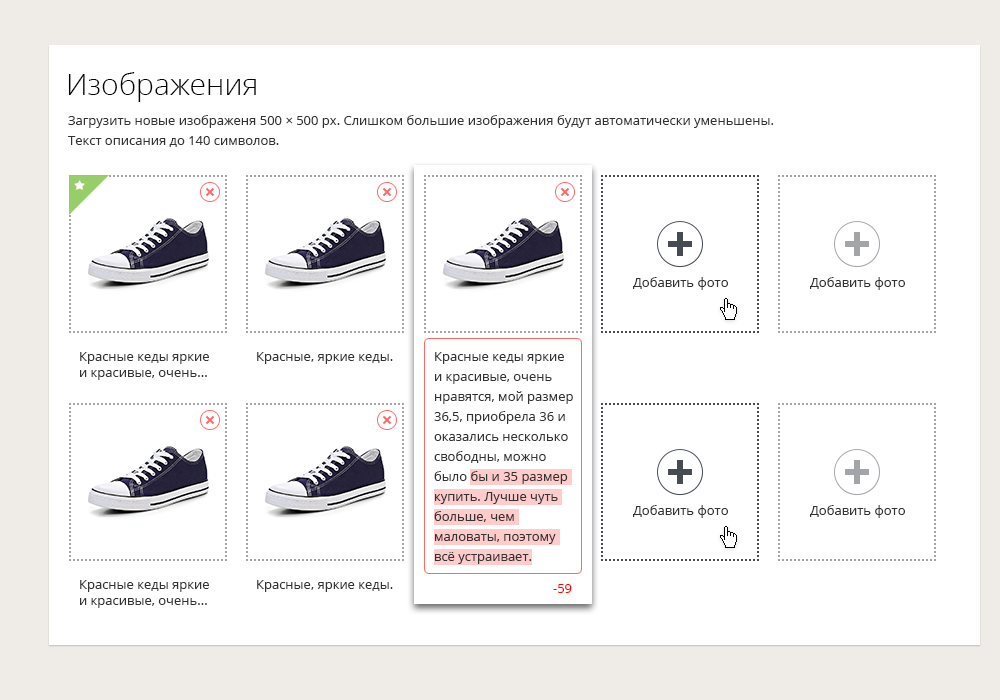
<style>
.page{position:relative;width:1000px;height:700px;background:#ffffff}
.page>*{position:absolute;margin:0}
.t1{font:30px "OpenSans-Light";color:#000000}
.t2{font:13px/20px "OpenSans";color:#333333}
.t3{font:13px "OpenSans";color:#333333}
.t4{font:13px/16px "OpenSans";color:#333333}
.t5{font:13px "OpenSans";color:#ff0301}
</style>
<div class="page">
<p class="t1" style="left:68px;top:72px;width:188px;height:30px">Изображения</p>
<p class="t2" style="left:68px;top:115px;width:706px;height:32px">Загрузить новые изображеня 500 × 500 px. Слишком большие изображения будут автоматически уменьшены.<br>Текст описания до 140 символов.</p>
<p class="t3" style="left:633px;top:277px;width:95px;height:13px">Добавить фото</p>
<p class="t3" style="left:810px;top:277px;width:95px;height:13px">Добавить фото</p>
<p class="t4" style="left:80px;top:352px;width:129px;height:28px">Красные кеды яркие <br>и красивые, очень...</p>
<p class="t3" style="left:257px;top:352px;width:136px;height:12px">Красные, яркие кеды.</p>
<p class="t2" style="left:434px;top:352px;width:139px;height:212px">Красные кеды яркие и красивые, очень нравятся, мой размер 36,5, приобрела 36 и оказались несколько свободны, можно было бы и 35 размер купить. Лучше чуть больше, чем маловаты, поэтому всё устраивает.</p>
<p class="t3" style="left:633px;top:505px;width:95px;height:13px">Добавить фото</p>
<p class="t3" style="left:810px;top:505px;width:95px;height:13px">Добавить фото</p>
<p class="t4" style="left:80px;top:580px;width:129px;height:28px">Красные кеды яркие <br>и красивые, очень...</p>
<p class="t3" style="left:257px;top:580px;width:136px;height:12px">Красные, яркие кеды.</p>
<p class="t5" style="left:553px;top:584px;width:19px;height:9px">-59</p>
</div>
